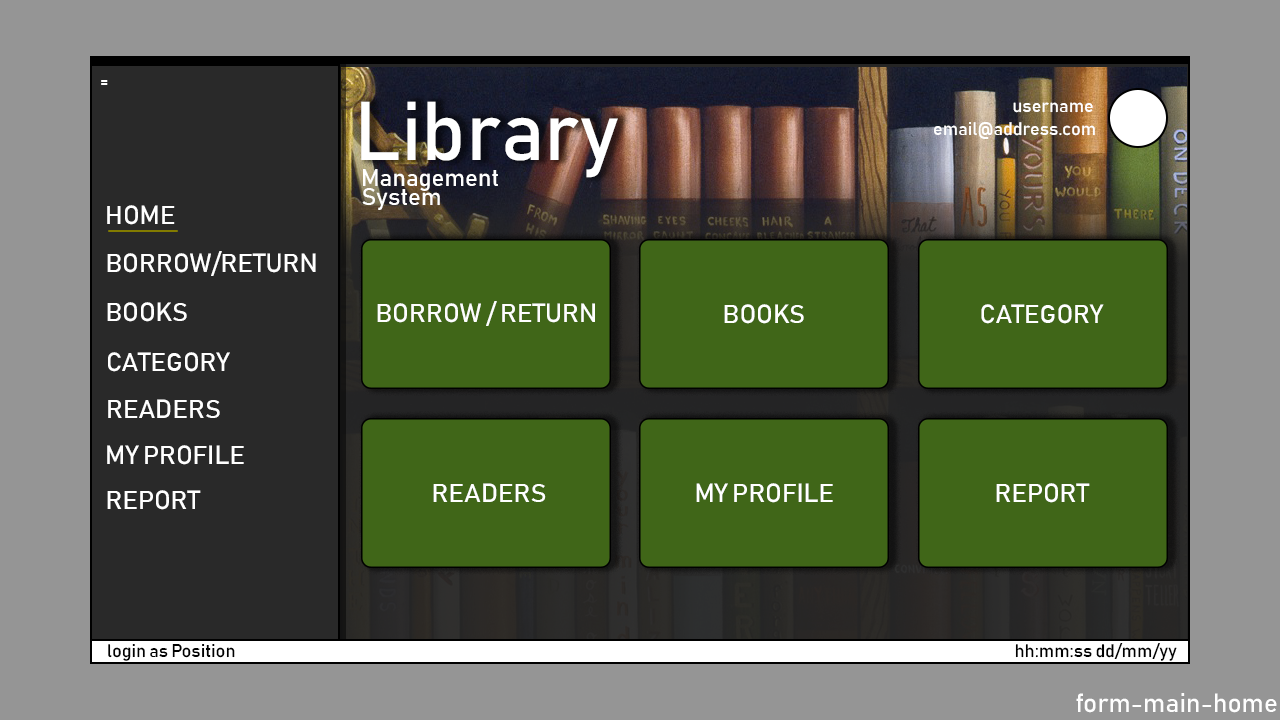
<style>
.page{position:relative;width:1280px;height:720px;background:#959595}
.page>*{position:absolute;margin:0}
.t1{font:18px "Bahnschrift";color:#ffffff}
.t2{font:82px "Bahnschrift";color:#ffffff}
.t3{font:24px "Bahnschrift";color:#ffffff}
.t4{font:26px "Bahnschrift";color:#ffffff}
.t5{font:26px "Bahnschrift";color:#fefefe}
.t6{font:18px "Bahnschrift";color:#000000}
</style>
<div class="page">
<p class="t1" style="left:101px;top:80px;width:7px;height:5px">=</p>
<p class="t2" style="left:361px;top:101px;width:257px;height:77px">Library</p>
<p class="t1" style="left:1013px;top:102px;width:80px;height:11px">username</p>
<p class="t1" style="left:934px;top:122px;width:161px;height:17px">email@address.com</p>
<p class="t3" style="left:363px;top:169px;width:135px;height:22px">Management</p>
<p class="t3" style="left:362px;top:188px;width:78px;height:22px">System</p>
<p class="t4" style="left:107px;top:205px;width:68px;height:20px">HOME</p>
<p class="t4" style="left:107px;top:251px;width:209px;height:25px">BORROW/RETURN</p>
<p class="t4" style="left:107px;top:302px;width:80px;height:20px">BOOKS</p>
<p class="t5" style="left:377px;top:301px;width:218px;height:25px">BORROW / RETURN</p>
<p class="t4" style="left:724px;top:304px;width:80px;height:20px">BOOKS</p>
<p class="t4" style="left:981px;top:304px;width:123px;height:20px">CATEGORY</p>
<p class="t4" style="left:108px;top:352px;width:122px;height:20px">CATEGORY</p>
<p class="t4" style="left:108px;top:399px;width:112px;height:19px">READERS</p>
<p class="t4" style="left:107px;top:445px;width:137px;height:20px">MY PROFILE</p>
<p class="t4" style="left:433px;top:483px;width:113px;height:19px">READERS</p>
<p class="t4" style="left:696px;top:483px;width:137px;height:20px">MY PROFILE</p>
<p class="t4" style="left:996px;top:483px;width:94px;height:20px">REPORT</p>
<p class="t4" style="left:107px;top:490px;width:94px;height:20px">REPORT</p>
<p class="t6" style="left:108px;top:644px;width:127px;height:17px">login as Position</p>
<p class="t6" style="left:1015px;top:643px;width:162px;height:18px">hh:mm:ss dd/mm/yy</p>
<p class="t5" style="left:1076px;top:693px;width:201px;height:20px">form-main-home</p>
</div>
